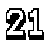
<style>
.page{position:relative;width:48px;height:48px;background:#ffffff}
.page>*{position:absolute;margin:0}
.t1{font:36px "KarmaFuture-Regular";color:#010101}
</style>
<div class="page">
<p class="t1" style="left:6px;top:8px;width:38px;height:32px">21</p>
</div>
